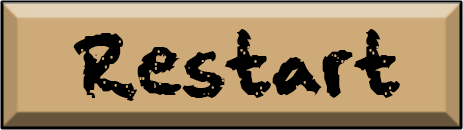
<style>
.page{position:relative;width:463px;height:130px;background:#cdaa77}
.page>*{position:absolute;margin:0}
.t1{font:70px "squeakychalksound";color:#000000}
</style>
<div class="page">
<p class="t1" style="left:73px;top:29px;width:327px;height:72px">Restart</p>
</div>
